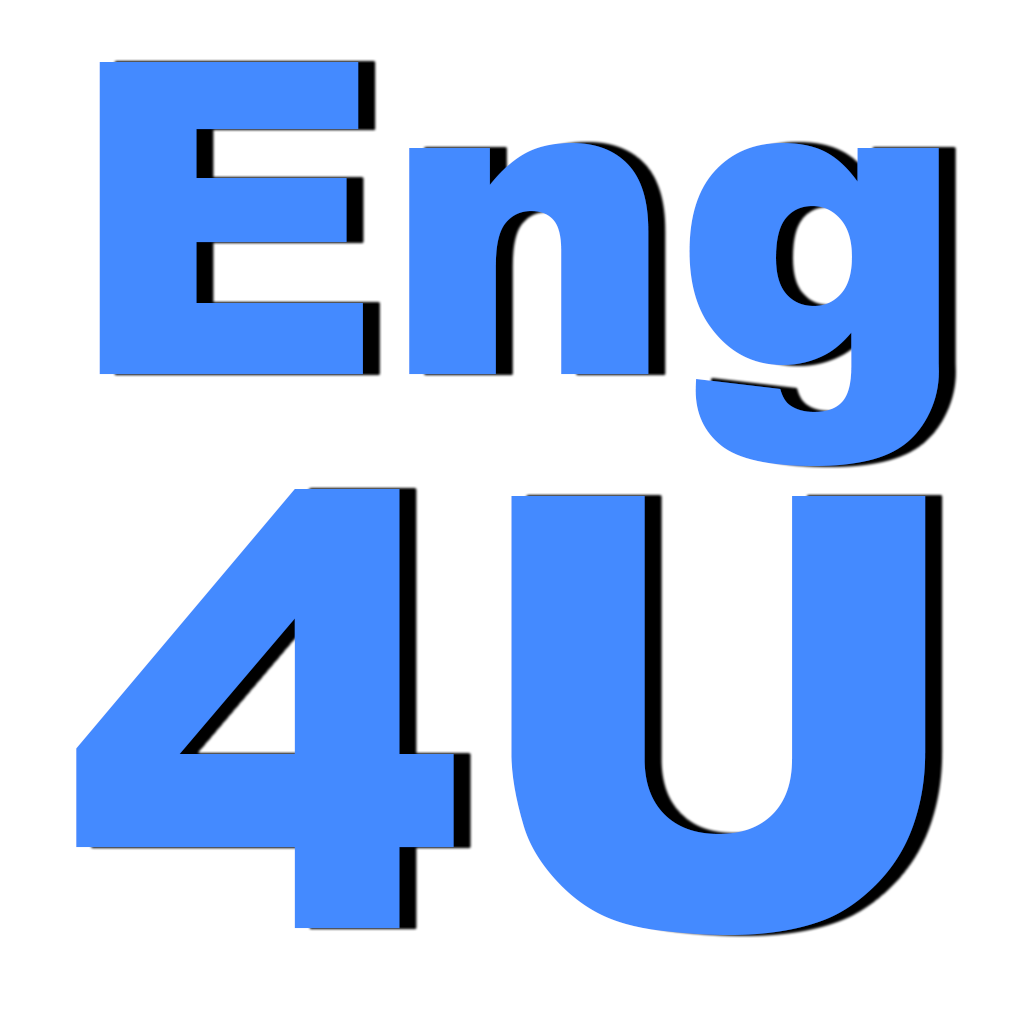
<style>
.page{position:relative;width:1024px;height:1024px;background:#ffffff}
.page>*{position:absolute;margin:0}
.t1{font:436.2px/553.7px "Arial-Black";color:#448aff}
.t2{font:603.5px/553.7px "Arial-Black";color:#448aff}
</style>
<div class="page">
<p class="t1" style="left:76px;top:62px;width:863px;height:873px;text-align:center">Eng<br><span class="t2">4U</span></p>
</div>
